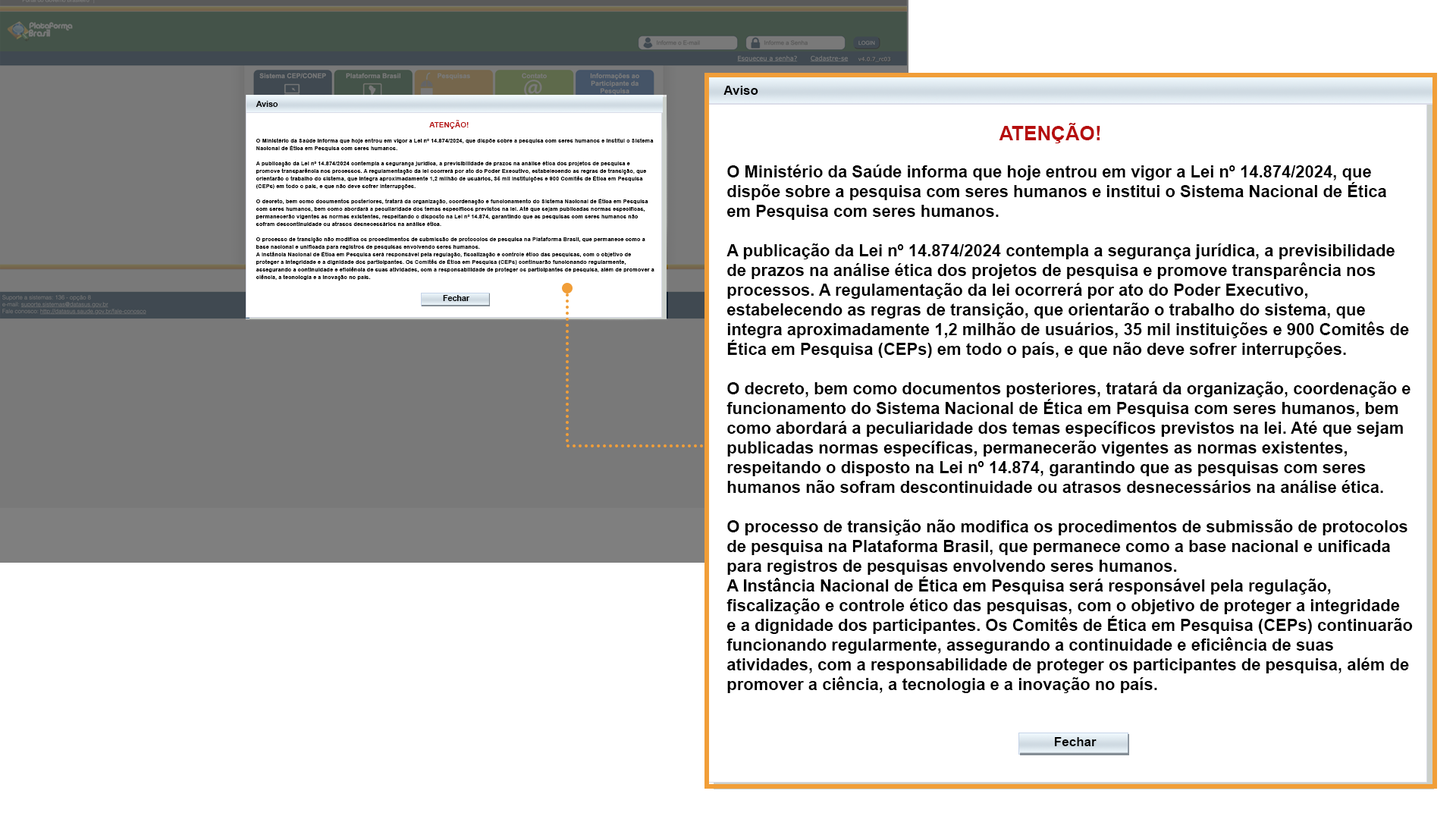
<style>
.page{position:relative;width:1456px;height:819px;background:#ffffff}
.page>*{position:absolute;margin:0}
.t1{font:13.1px "Arial-BoldMT";letter-spacing:-0.01em;color:#000000}
.t2{font:8.2px "Arial-BoldMT";letter-spacing:-0.01em;color:#000000}
.t3{font:7.6px "Arial-BoldMT";color:#b60e0e}
.t4{font:19.7px "Arial-BoldMT";color:#b60e0e}
.t5{font:5.7px/7.6px "Arial-BoldMT";color:#000000}
.t6{font:16.7px/19.7px "Arial-BoldMT";color:#000000}
</style>
<div class="page">
<p class="t1" style="left:723px;top:86px;width:35px;height:9px">Aviso</p>
<p class="t2" style="left:256px;top:101px;width:22px;height:6px">Aviso</p>
<p class="t3" style="left:429px;top:120px;width:40px;height:9px">ATENÇÃO!</p>
<p class="t4" style="left:999px;top:123px;width:101px;height:20px">ATENÇÃO!</p>
<p class="t5" style="left:256px;top:138px;width:398px;height:143px">O Ministério da Saúde informa que hoje entrou em vigor a Lei nº 14.874/2024, que dispõe sobre a pesquisa com seres humanos e institui o Sistema Nacional de Ética em Pesquisa com seres humanos. <br> <br>A publicação da Lei nº 14.874/2024 contempla a segurança jurídica, a previsibilidade de prazos na análise ética dos projetos de pesquisa e promove transparência nos processos. A regulamentação da lei ocorrerá por ato do Poder Executivo, estabelecendo as regras de transição, que orientarão o trabalho do sistema, que integra aproximadamente 1,2 milhão de usuários, 35 mil instituições e 900 Comitês de Ética em Pesquisa (CEPs) em todo o país, e que não deve sofrer interrupções. <br><br>O decreto, bem como documentos posteriores, tratará da organização, coordenação e funcionamento do Sistema Nacional de Ética em Pesquisa com seres humanos, bem como abordará a peculiaridade dos temas específicos previstos na lei. Até que sejam publicadas normas específicas, permanecerão vigentes as normas existentes, respeitando o disposto na Lei nº 14.874, garantindo que as pesquisas com seres humanos não sofram descontinuidade ou atrasos desnecessários na análise ética.<br><br>O processo de transição não modifica os procedimentos de submissão de protocolos de pesquisa na Plataforma Brasil, que permanece como a base nacional e unificada para registros de pesquisas envolvendo seres humanos. <br>A Instância Nacional de Ética em Pesquisa será responsável pela regulação, fiscalização e controle ético das pesquisas, com o objetivo de proteger a integridade e a dignidade dos participantes. Os Comitês de Ética em Pesquisa (CEPs) continuarão funcionando regularmente, assegurando a continuidade e eficiência de suas atividades, com a responsabilidade de proteger os participantes de pesquisa, além de promover a ciência, a tecnologia e a inovação no país.</p>
<p class="t6" style="left:726px;top:165px;width:687px;height:528px">O Ministério da Saúde informa que hoje entrou em vigor a Lei nº 14.874/2024, que dispõe sobre a pesquisa com seres humanos e institui o Sistema Nacional de Ética em Pesquisa com seres humanos. <br> <br>A publicação da Lei nº 14.874/2024 contempla a segurança jurídica, a previsibilidade de prazos na análise ética dos projetos de pesquisa e promove transparência nos processos. A regulamentação da lei ocorrerá por ato do Poder Executivo, estabelecendo as regras de transição, que orientarão o trabalho do sistema, que integra aproximadamente 1,2 milhão de usuários, 35 mil instituições e 900 Comitês de Ética em Pesquisa (CEPs) em todo o país, e que não deve sofrer interrupções. <br><br>O decreto, bem como documentos posteriores, tratará da organização, coordenação e funcionamento do Sistema Nacional de Ética em Pesquisa com seres humanos, bem como abordará a peculiaridade dos temas específicos previstos na lei. Até que sejam publicadas normas específicas, permanecerão vigentes as normas existentes, respeitando o disposto na Lei nº 14.874, garantindo que as pesquisas com seres humanos não sofram descontinuidade ou atrasos desnecessários na análise ética.<br><br>O processo de transição não modifica os procedimentos de submissão de protocolos de pesquisa na Plataforma Brasil, que permanece como a base nacional e unificada para registros de pesquisas envolvendo seres humanos. <br>A Instância Nacional de Ética em Pesquisa será responsável pela regulação, fiscalização e controle ético das pesquisas, com o objetivo de proteger a integridade e a dignidade dos participantes. Os Comitês de Ética em Pesquisa (CEPs) continuarão funcionando regularmente, assegurando a continuidade e eficiência de suas atividades, com a responsabilidade de proteger os participantes de pesquisa, além de promover a ciência, a tecnologia e a inovação no país.</p>
<p class="t2" style="left:443px;top:295px;width:27px;height:6px">Fechar</p>
<p class="t1" style="left:1055px;top:737px;width:42px;height:9px">Fechar</p>
</div>
